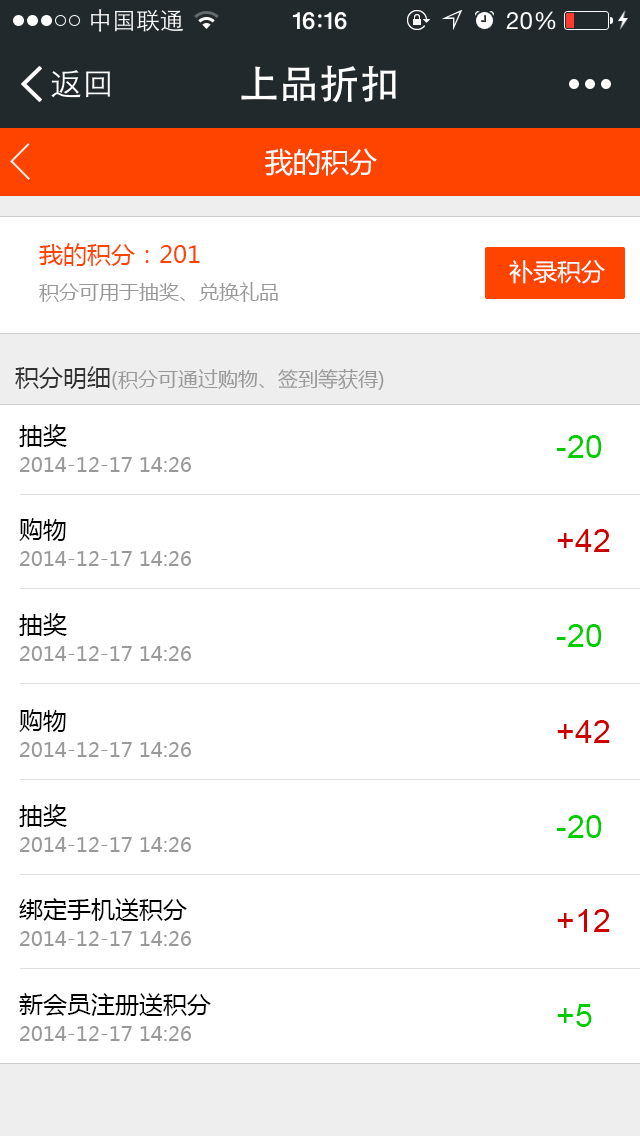
<style>
.page{position:relative;width:640px;height:1136px;background:#ffffff}
.page>*{position:absolute;margin:0}
.t1{font:28px "MicrosoftYaHei";color:#ffffff}
.t2{font:20px/36px "MicrosoftYaHei";color:#999999}
.t3{font:24px/36px "MicrosoftYaHei";color:#ff4400}
.t4{font:24px "MicrosoftYaHei";color:#ffffff}
.t5{font:20px "MicrosoftYaHei";color:#999999}
.t6{font:24px "MicrosoftYaHei";color:#333333}
.t7{font:20px/28px "MicrosoftYaHei";color:#999999}
.t8{font:24px/28px "MicrosoftYaHei";color:#000000}
.t9{font:32px "ArialMT";color:#00cc00}
.t10{font:32px "ArialMT";color:#cc0000}
</style>
<div class="page">
<p class="t1" style="left:265px;top:148px;width:112px;height:28px">我的积分</p>
<p class="t2" style="left:39px;top:243px;width:239px;height:59px"><span class="t3">我的积分：201<br></span>积分可用于抽奖、兑换礼品</p>
<p class="t4" style="left:509px;top:260px;width:96px;height:24px">补录积分</p>
<p class="t5" style="left:15px;top:366px;width:369px;height:24px"><span class="t6">积分明细</span>(积分可通过购物、签到等获得)</p>
<p class="t7" style="left:19px;top:424px;width:172px;height:48px"><span class="t8">抽奖<br></span>2014-12-17 14:26</p>
<p class="t9" style="left:557px;top:435px;width:45px;height:23px">-20</p>
<p class="t7" style="left:19px;top:518px;width:172px;height:48px"><span class="t8">购物<br></span>2014-12-17 14:26</p>
<p class="t10" style="left:557px;top:529px;width:53px;height:23px">+42</p>
<p class="t7" style="left:19px;top:613px;width:172px;height:48px"><span class="t8">抽奖<br></span>2014-12-17 14:26</p>
<p class="t9" style="left:557px;top:624px;width:45px;height:23px">-20</p>
<p class="t7" style="left:19px;top:709px;width:172px;height:48px"><span class="t8">购物<br></span>2014-12-17 14:26</p>
<p class="t10" style="left:557px;top:720px;width:53px;height:23px">+42</p>
<p class="t7" style="left:19px;top:804px;width:172px;height:48px"><span class="t8">抽奖<br></span>2014-12-17 14:26</p>
<p class="t9" style="left:557px;top:815px;width:45px;height:23px">-20</p>
<p class="t7" style="left:19px;top:898px;width:172px;height:48px"><span class="t8">绑定手机送积分<br></span>2014-12-17 14:26</p>
<p class="t10" style="left:557px;top:909px;width:53px;height:23px">+12</p>
<p class="t7" style="left:19px;top:993px;width:192px;height:48px"><span class="t8">新会员注册送积分<br></span>2014-12-17 14:26</p>
<p class="t9" style="left:557px;top:1004px;width:35px;height:23px">+5</p>
</div>
